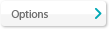
<style>
.page{position:relative;width:110px;height:30px;background:#ffffff}
.page>*{position:absolute;margin:0}
.t1{font:11px "MyriadPro-Regular";color:#737373}
</style>
<div class="page">
<p class="t1" style="left:11px;top:10px;width:37px;height:10px">Options</p>
</div>
